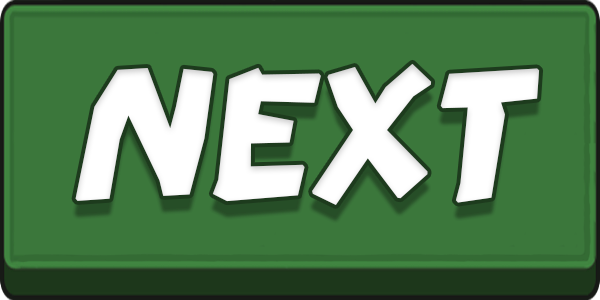
<style>
.page{position:relative;width:600px;height:300px;background:#3b773b}
.page>*{position:absolute;margin:0}
.t1{font:187.5px "Boulder";letter-spacing:-0.025em;color:#ffffff;font-weight:bold;font-style:italic}
</style>
<div class="page">
<p class="t1" style="left:75px;top:63px;width:465px;height:142px">next</p>
</div>
